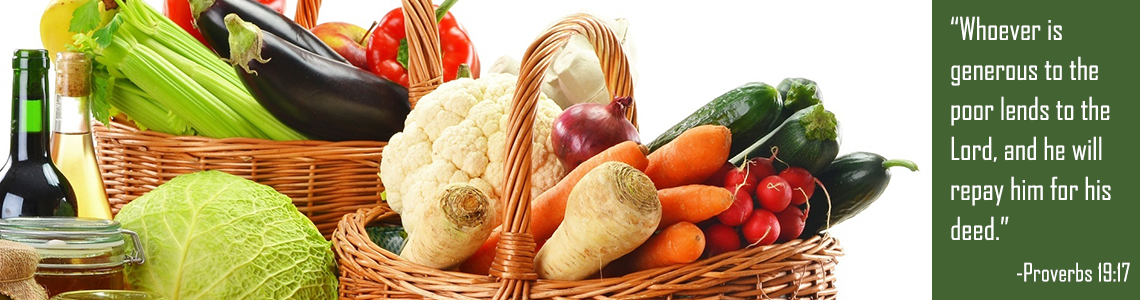
<style>
.page{position:relative;width:1140px;height:300px}
.page>*{position:absolute;margin:0}
.t1{font:30px/40px "AgencyFB-Reg";color:#fefefe}
.t2{font:24px "AgencyFB-Reg";color:#fefefe}
</style>
<div class="page">
<p class="t1" style="left:950px;top:16px;width:161px;height:225px">“Whoever is generous to the poor lends to the Lord, and he will repay him for his deed.”</p>
<p class="t2" style="left:1017px;top:262px;width:113px;height:20px">-Proverbs 19:17</p>
</div>
